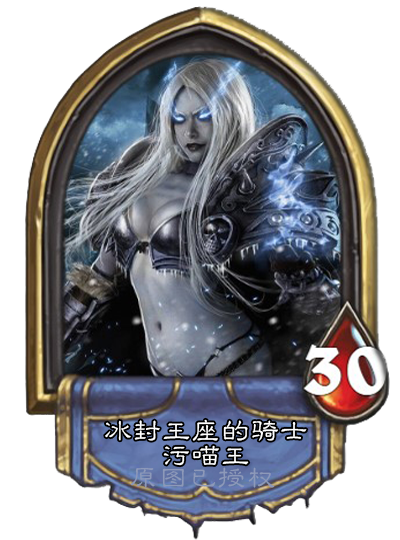
<style>
.page{position:relative;width:400px;height:540px;background:#ffffff}
.page>*{position:absolute;margin:0}
.t1{font:28px/25px "GBJenLei-Medium";letter-spacing:0.05em;color:#ffffff}
.t2{font:28px "GBJenLei-Medium";letter-spacing:0.05em;color:#8d99b9}
</style>
<div class="page">
<p class="t1" style="left:105px;top:419px;width:202px;height:47px;text-align:center">冰封王座的骑士<br>污喵王</p>
<p class="t2" style="left:131px;top:467px;width:144px;height:21px">原图已授权</p>
</div>
